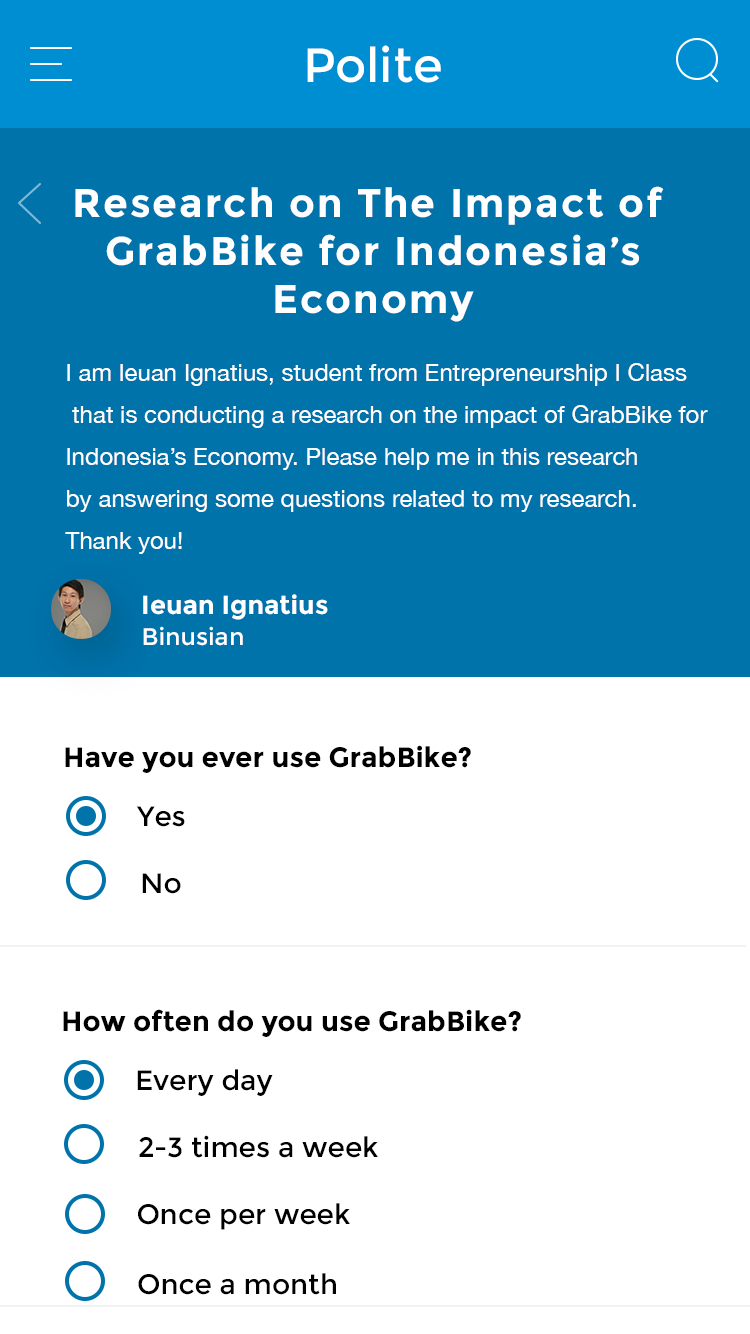
<style>
.page{position:relative;width:750px;height:1334px;background:#ffffff}
.page>*{position:absolute;margin:0}
.t1{font:48px "Montserrat-Regular";color:#ffffff}
.t2{font:40px/48px "Montserrat-Bold";letter-spacing:0.05em;color:#ffffff}
.t3{font:12px/42px "HelveticaNeue";color:#ffffff}
.t4{font:26px "Montserrat-Bold";color:#ffffff}
.t5{font:12px "Montserrat-Regular";color:#ffffff}
.t6{font:28px "Montserrat-Bold";color:#000000}
.t7{font:28px "Montserrat-Regular";color:#000000}
</style>
<div class="page">
<p class="t1" style="left:307px;top:45px;width:134px;height:38px">Polite</p>
<p class="t2" style="left:75px;top:186px;width:589px;height:136px;text-align:center">Research on The Impact of <br>GrabBike for Indonesia’s<br>Economy</p>
<p class="t3" style="left:65px;top:363px;width:643px;height:191px">I am Ieuan Ignatius, student from Entrepreneurship I Class<br> that is conducting a research on the impact of GrabBike for<br>Indonesia’s Economy. Please help me in this research <br>by answering some questions related to my research.<br>Thank you!</p>
<p class="t4" style="left:143px;top:594px;width:185px;height:26px">Ieuan Ignatius</p>
<p class="t5" style="left:143px;top:626px;width:100px;height:20px">Binusian</p>
<p class="t6" style="left:65px;top:745px;width:406px;height:28px">Have you ever use GrabBike?</p>
<p class="t7" style="left:136px;top:806px;width:49px;height:21px">Yes</p>
<p class="t7" style="left:142px;top:873px;width:39px;height:21px">No</p>
<p class="t6" style="left:63px;top:1009px;width:458px;height:28px">How often do you use GrabBike?</p>
<p class="t7" style="left:137px;top:1069px;width:136px;height:27px">Every day</p>
<p class="t7" style="left:139px;top:1135px;width:239px;height:23px">2-3 times a week</p>
<p class="t7" style="left:138px;top:1203px;width:212px;height:27px">Once per week</p>
<p class="t7" style="left:138px;top:1273px;width:198px;height:22px">Once a month</p>
</div>
